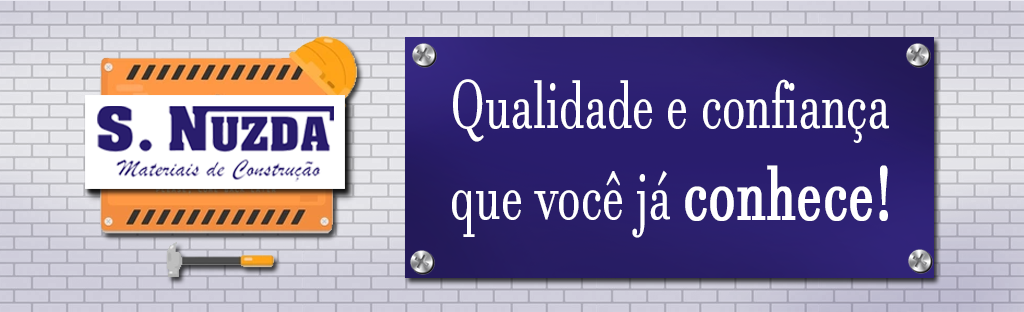
<style>
.page{position:relative;width:1024px;height:312px}
.page>*{position:absolute;margin:0}
.t1{font:67.2px "JavaneseText";color:#ffffff;scale:0.69 1}
.t2{font:75.6px "JavaneseText";color:#ffffff;font-weight:bold;scale:0.69 1}
</style>
<div class="page">
<p class="t1" style="left:452px;top:79px;width:437px;height:159px">Qualidade e confiança<br>que você já <span class="t2">conhece!</span></p>
</div>
